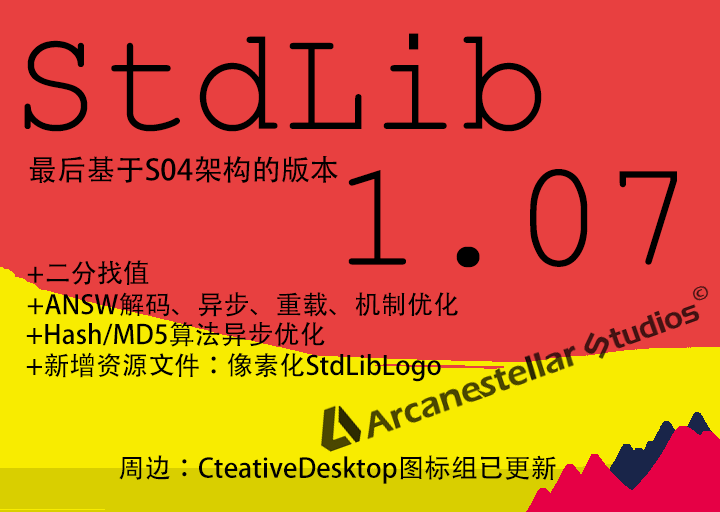
<style>
.page{position:relative;width:720px;height:512px;background:#e84040}
.page>*{position:absolute;margin:0}
.t1{font:150.1px "CourierNewPSMT";color:#000000}
.t2{font:29.2px "AdobeHeitiStd-Regular";color:#000000}
.t3{font:152.2px "CourierNewPSMT";color:#000000}
.t4{font:26.2px "AdobeHeitiStd-Regular";color:#000000}
.t5{font:26.6px "AdobeHeitiStd-Regular";color:#000000}
</style>
<div class="page">
<p class="t1" style="left:24px;top:33px;width:518px;height:99px">StdLib</p>
<p class="t2" style="left:29px;top:156px;width:309px;height:27px">最后基于S04架构的版本</p>
<p class="t3" style="left:348px;top:169px;width:329px;height:99px">1.07</p>
<p class="t4" style="left:27px;top:260px;width:122px;height:25px">+二分找值</p>
<p class="t4" style="left:27px;top:292px;width:431px;height:25px">+ANSW解码、异步、重载、机制优化</p>
<p class="t4" style="left:26px;top:322px;width:299px;height:25px">+Hash/MD5算法异步优化</p>
<p class="t4" style="left:26px;top:352px;width:415px;height:30px">+新增资源文件：像素化StdLibLogo</p>
<p class="t5" style="left:119px;top:455px;width:437px;height:29px">周边：CteativeDesktop图标组已更新</p>
</div>
